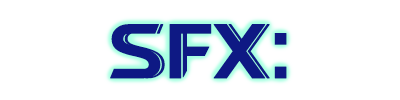
<style>
.page{position:relative;width:400px;height:100px;background:#ffffff}
.page>*{position:absolute;margin:0}
.t1{font:75px "SweraDemoShadowed";color:#0e1984;font-weight:bold}
</style>
<div class="page">
<p class="t1" style="left:110px;top:24px;width:177px;height:55px">SFX:</p>
</div>
